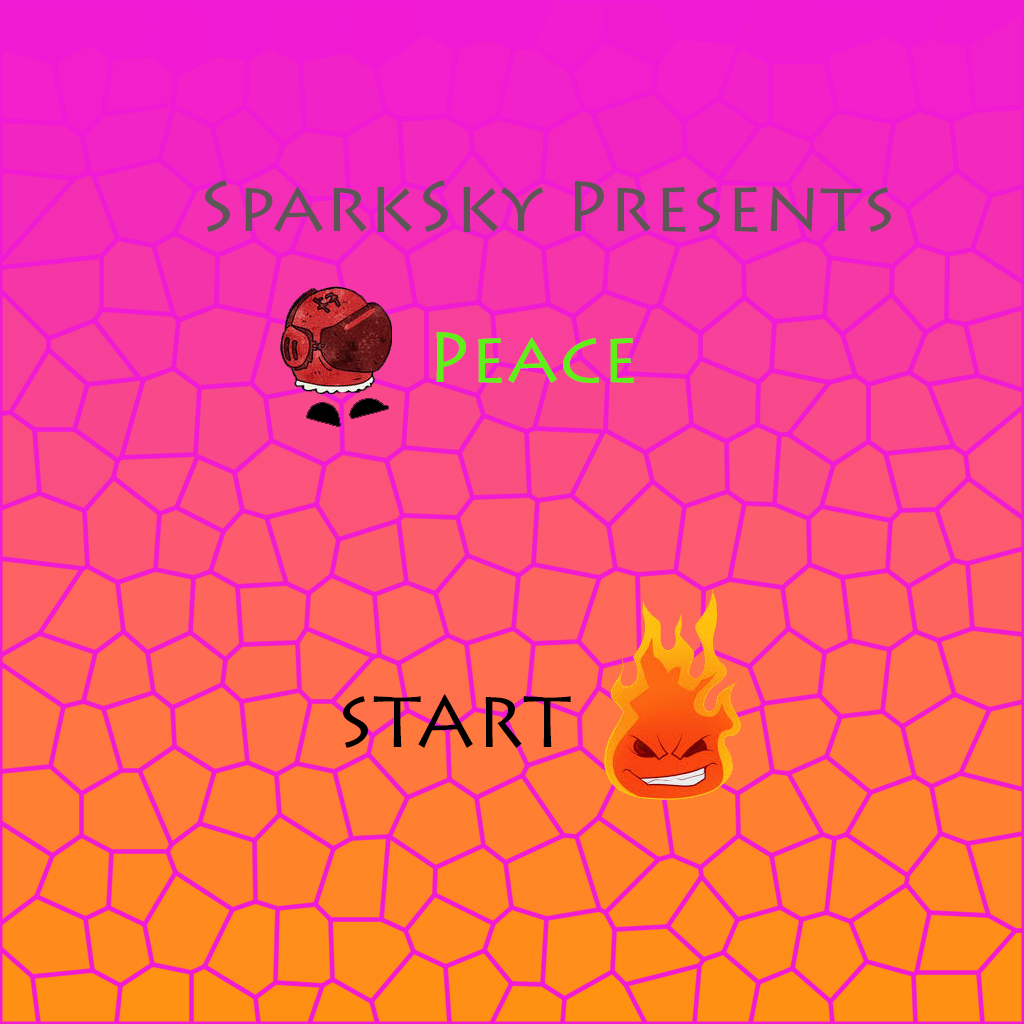
<style>
.page{position:relative;width:1024px;height:1024px}
.page>*{position:absolute;margin:0}
.t1{font:72px "LithosPro-Regular";color:#5e5656}
.t2{font:72px "LithosPro-Regular";color:#5ff018}
.t3{font:72px "LithosPro-Regular";color:#000000}
</style>
<div class="page">
<p class="t1" style="left:205px;top:180px;width:686px;height:52px">SparkSky Presents</p>
<p class="t2" style="left:436px;top:332px;width:198px;height:51px">Peace</p>
<p class="t3" style="left:343px;top:694px;width:228px;height:54px">START</p>
</div>
